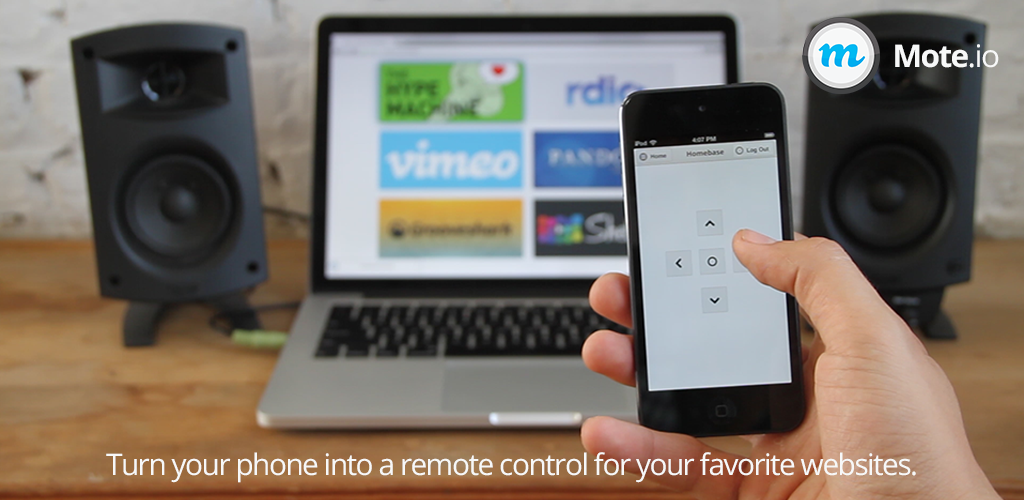
<style>
.page{position:relative;width:1024px;height:500px}
.page>*{position:absolute;margin:0}
.t1{font:30.9px "OpenSans-Bold";letter-spacing:-0.05em;color:#f7f8f8}
.t2{font:30.9px "OpenSans";letter-spacing:-0.05em;color:#f7f8f8}
.t3{font:29.8px "OpenSans";letter-spacing:-0.05em;color:#f7f8f8}
</style>
<div class="page">
<p class="t1" style="left:895px;top:44px;width:104px;height:24px">Mote<span class="t2">.io</span></p>
<p class="t3" style="left:106px;top:452px;width:810px;height:31px">Turn your phone into a remote control for your favorite websites.</p>
</div>
